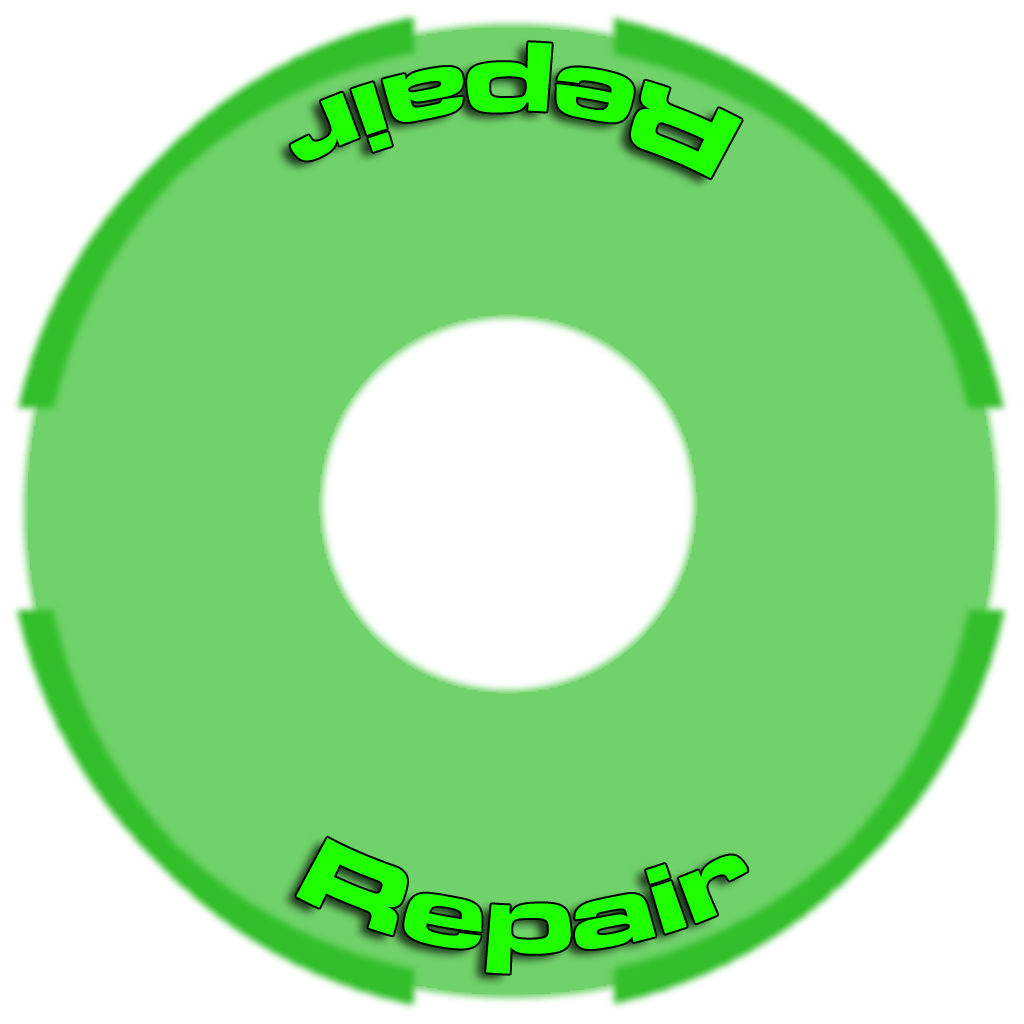
<style>
.page{position:relative;width:1024px;height:1024px;background:#70d26a}
.page>*{position:absolute;margin:0}
.t1{font:100px "MicrogrammaD-BoldExte";color:#1eff00}
</style>
<div class="page">
<p class="t1" style="left:290px;top:42px;width:452px;height:137px;rotate:180deg">Repair</p>
<p class="t1" style="left:296px;top:837px;width:452px;height:137px">Repair</p>
</div>
